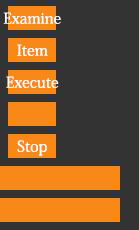
<style>
.page{position:relative;width:139px;height:230px;background:#333333}
.page>*{position:absolute;margin:0}
.t1{font:15px/32px "KozMinPro-Medium";color:#ffffff}
</style>
<div class="page">
<p class="t1" style="left:3px;top:12px;width:58px;height:144px;text-align:center">Examine<br>Item<br>Execute<br><br>Stop</p>
</div>
